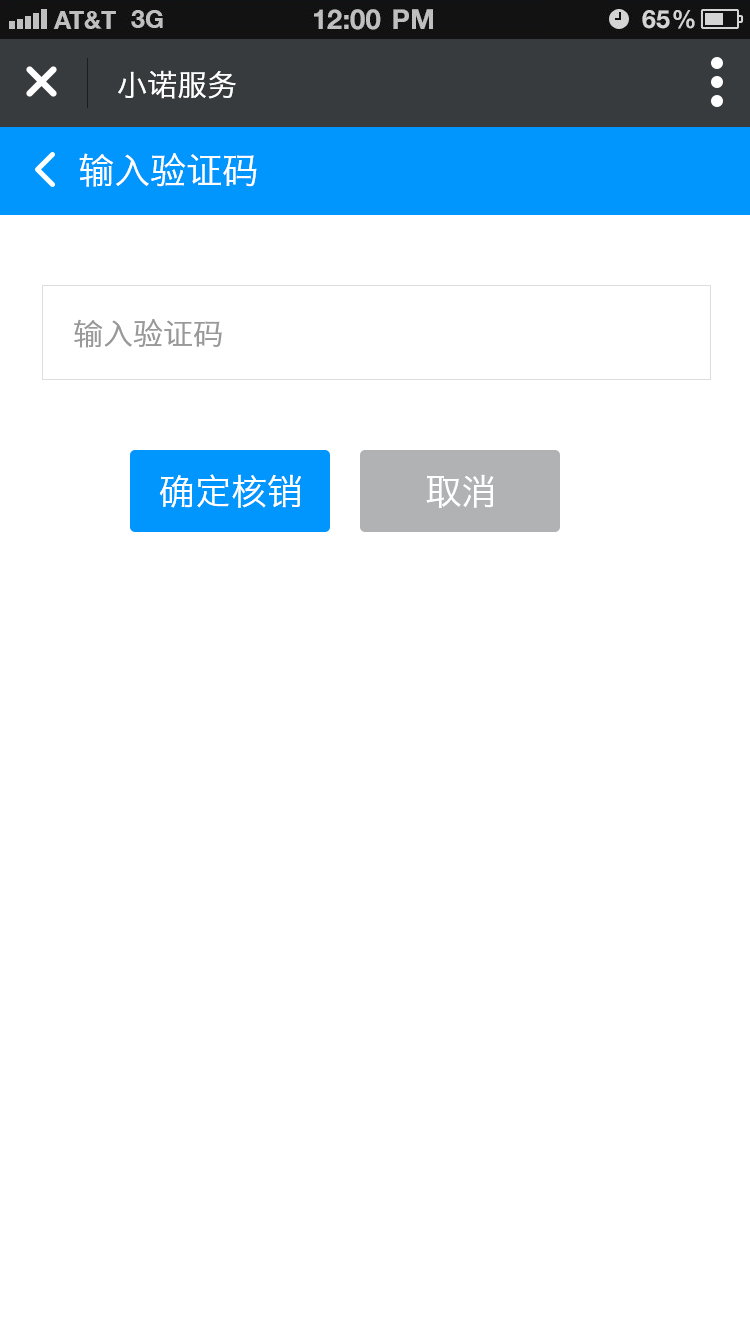
<style>
.page{position:relative;width:750px;height:1334px;background:#ffffff}
.page>*{position:absolute;margin:0}
.t1{font:30px "HiraginoSansGB-W3";color:#ffffff}
.t2{font:36px "HiraginoSansGB-W3";color:#ffffff}
.t3{font:30px "HiraginoSansGB-W3";color:#999999}
</style>
<div class="page">
<p class="t1" style="left:118px;top:70px;width:118px;height:29px">小诺服务</p>
<p class="t2" style="left:79px;top:153px;width:178px;height:34px">输入验证码</p>
<p class="t3" style="left:74px;top:318px;width:148px;height:30px">输入验证码</p>
<p class="t2" style="left:159px;top:474px;width:142px;height:34px">确定核销</p>
<p class="t2" style="left:426px;top:474px;width:68px;height:34px">取消</p>
</div>
